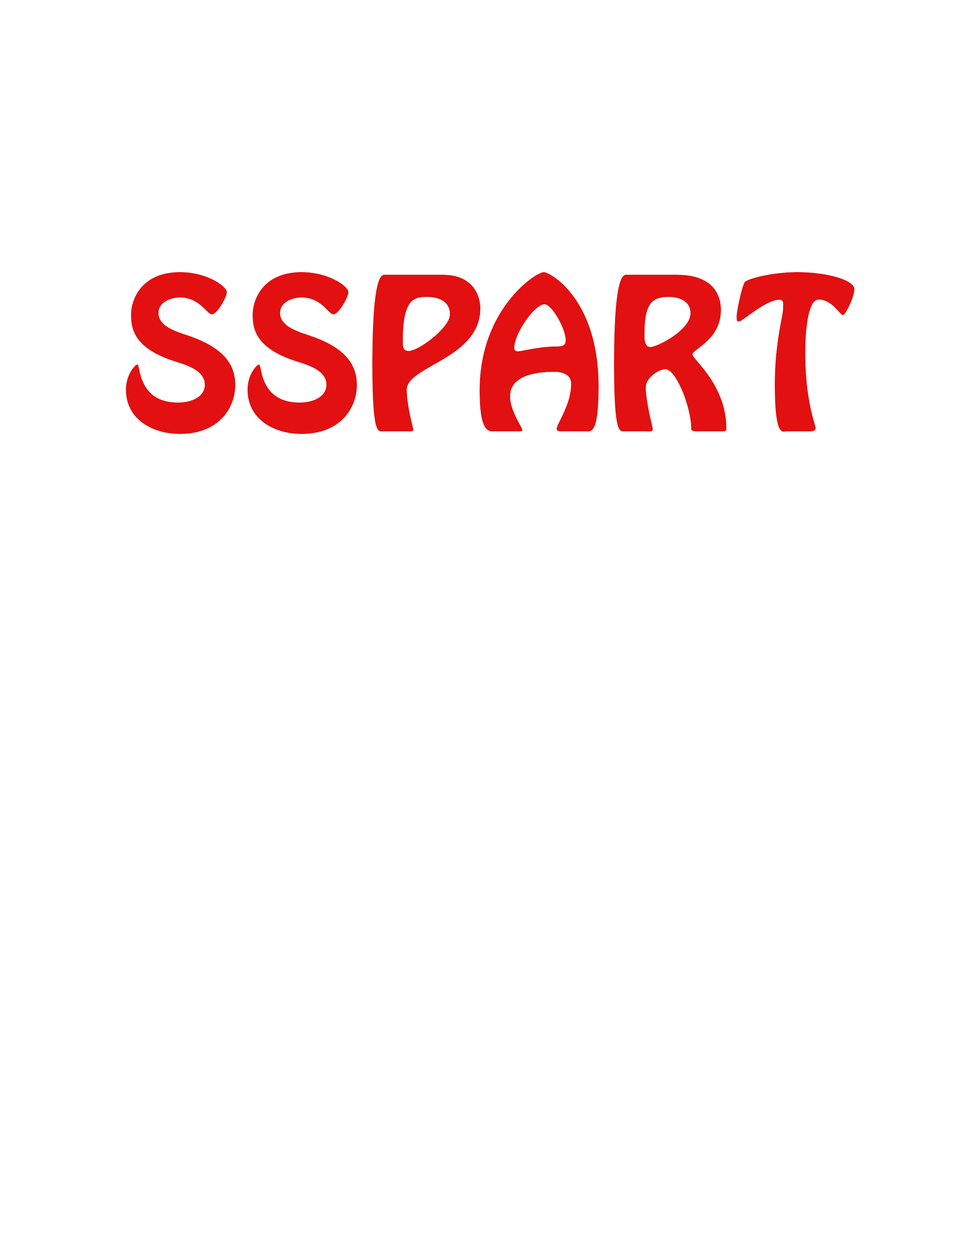
<style>
.page{position:relative;width:960px;height:1242px;background:#ffffff}
.page>*{position:absolute;margin:0}
.t1{font:188.2px "HoboStd";color:#e21010}
</style>
<div class="page">
<p class="t1" style="left:126px;top:272px;width:729px;height:162px">SSPART</p>
</div>
